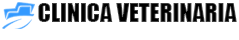
<style>
.page{position:relative;width:239px;height:40px;background:#ffffff}
.page>*{position:absolute;margin:0}
.t1{font:24px "Impact"}
</style>
<div class="page">
<p class="t1" style="left:38px;top:3px;width:199px;height:19px">CLINICA VETERINARIA</p>
</div>
